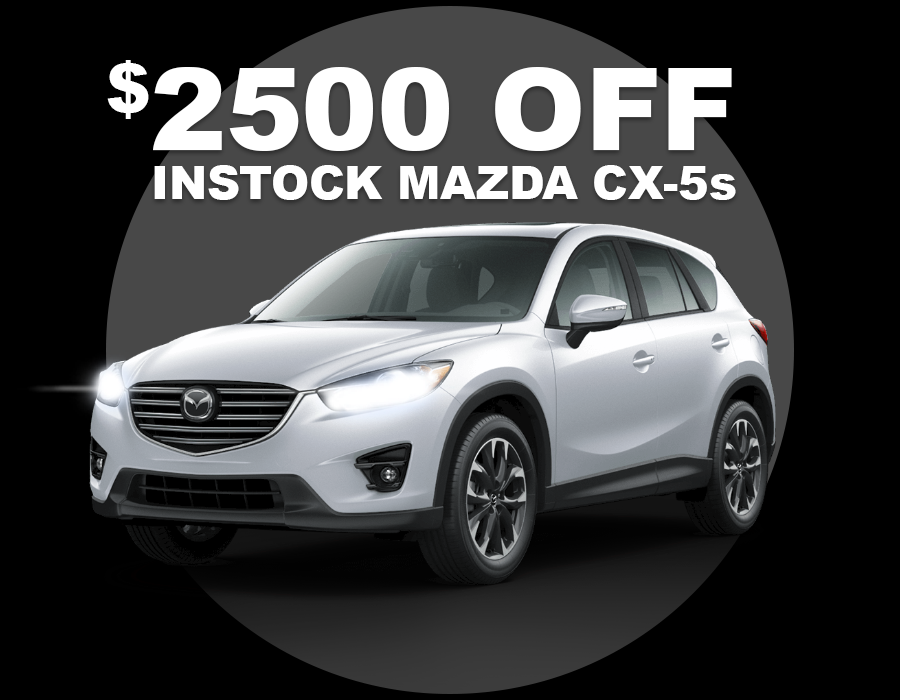
<style>
.page{position:relative;width:900px;height:700px;background:#000000}
.page>*{position:absolute;margin:0}
.t1{font:46.2px/48.4px "Arial-Black";letter-spacing:-0.01em;color:#ffffff}
.t2{font:115.2px/48.4px "Arial-Black";letter-spacing:-0.01em;color:#ffffff}
</style>
<div class="page">
<p class="t1" style="left:107px;top:60px;width:629px;height:140px;text-align:center"><span class="t2">$2500 OFF<br></span>   INSTOCK MAZDA CX-5s</p>
</div>
